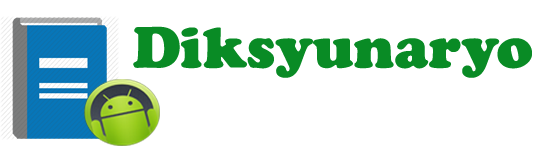
<style>
.page{position:relative;width:550px;height:156px;background:#ffffff}
.page>*{position:absolute;margin:0}
.t1{font:60px "CooperBlack";color:#098b25}
</style>
<div class="page">
<p class="t1" style="left:133px;top:26px;width:399px;height:52px">Diksyunaryo</p>
</div>
